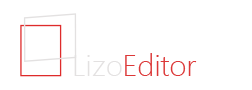
<style>
.page{position:relative;width:252px;height:90px;background:#ffffff}
.page>*{position:absolute;margin:0}
.t1{font:30px "SegoeUI-Light";color:#dc3838}
.t2{font:30px "SegoeUI-Light";color:#e3e1e1}
</style>
<div class="page">
<p class="t1" style="left:74px;top:53px;width:123px;height:23px"><span class="t2">Lizo</span>Editor</p>
</div>
